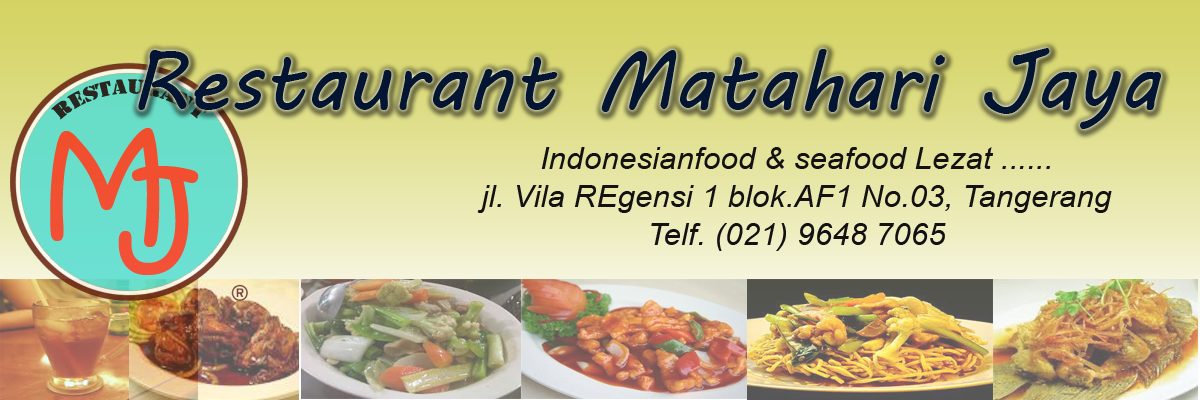
<style>
.page{position:relative;width:1200px;height:400px}
.page>*{position:absolute;margin:0}
.t1{font:82.7px "MVBoli";color:#031532}
.t2{font:31.5px "Arial-ItalicMT";color:#131111}
</style>
<div class="page">
<p class="t1" style="left:138px;top:48px;width:1023px;height:81px">Restaurant Matahari Jaya</p>
<p class="t2" style="left:477px;top:147px;width:635px;height:104px;text-align:center">Indonesianfood &amp; seafood Lezat ......<br>jl. Vila REgensi 1 blok.AF1 No.03, Tangerang<br>Telf. (021) 9648 7065</p>
</div>
